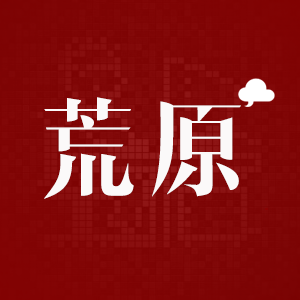
<style>
.page{position:relative;width:300px;height:300px}
.page>*{position:absolute;margin:0}
.t1{font:110.4px "MFJunYa_Noncommercial-Regular";letter-spacing:0.11em;color:#fbf9f9;scale:1.15 1}
</style>
<div class="page">
<p class="t1" style="left:44px;top:97px;width:197px;height:102px">荒原</p>
</div>
